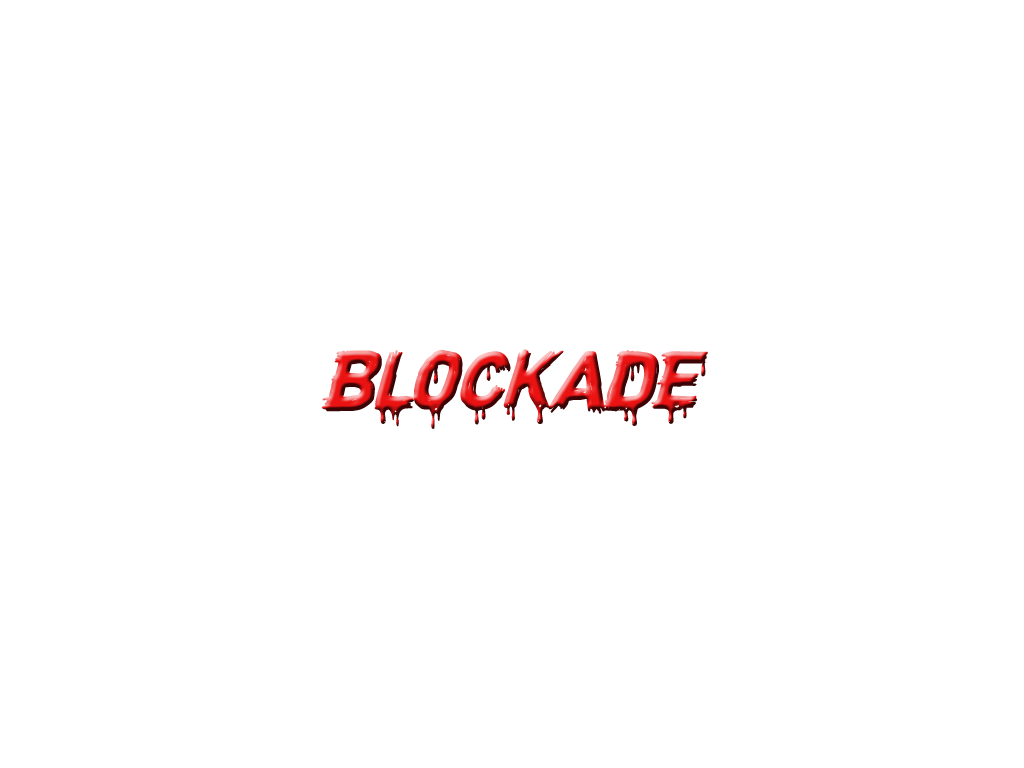
<style>
.page{position:relative;width:1024px;height:768px;background:#ffffff}
.page>*{position:absolute;margin:0}
.t1{font:80px "CFNightofTerrorPERSONAL-Reg"}
</style>
<div class="page">
<p class="t1" style="left:321px;top:349px;width:387px;height:80px">BlockAde</p>
</div>
